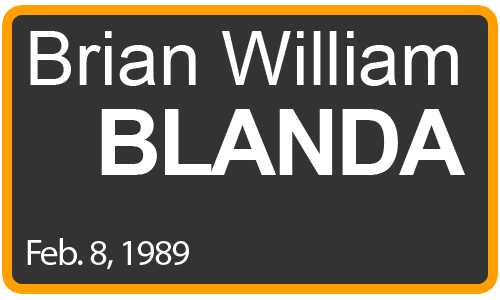
<style>
.page{position:relative;width:500px;height:300px;background:#333333}
.page>*{position:absolute;margin:0}
.t1{font:75px "ArialMT";color:#ffffff}
.t2{font:92px "Arial-BoldMT";letter-spacing:-0.04em;color:#ffffff}
.t3{font:37px "MyriadPro-Regular";letter-spacing:-0.04em;color:#ffffff}
</style>
<div class="page">
<p class="t1" style="left:30px;top:31px;width:428px;height:55px">Brian William</p>
<p class="t2" style="left:101px;top:109px;width:364px;height:66px">BLANDA</p>
<p class="t3" style="left:27px;top:238px;width:162px;height:32px">Feb. 8, 1989</p>
</div>
